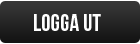
<style>
.page{position:relative;width:140px;height:44px}
.page>*{position:absolute;margin:0}
.t1{font:24px "BebasNeue";color:#ffffff}
</style>
<div class="page">
<p class="t1" style="left:34px;top:14px;width:67px;height:17px">Logga ut</p>
</div>
